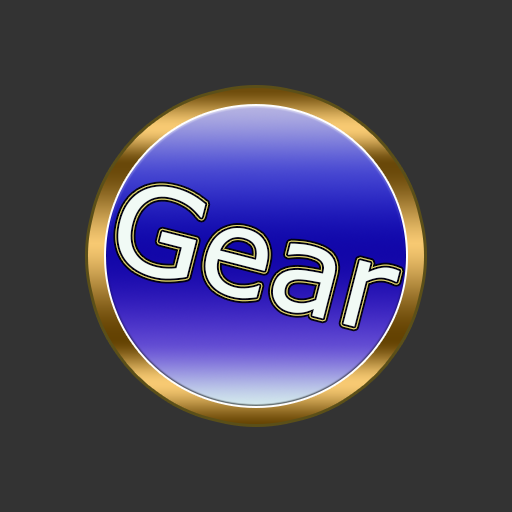
<style>
.page{position:relative;width:512px;height:512px;background:#333333}
.page>*{position:absolute;margin:0}
.t1{font:120.2px "MSReferenceSansSerif";color:#f1faf5}
</style>
<div class="page">
<p class="t1" style="left:118px;top:186px;width:282px;height:141px;rotate:14deg">Gear</p>
</div>
